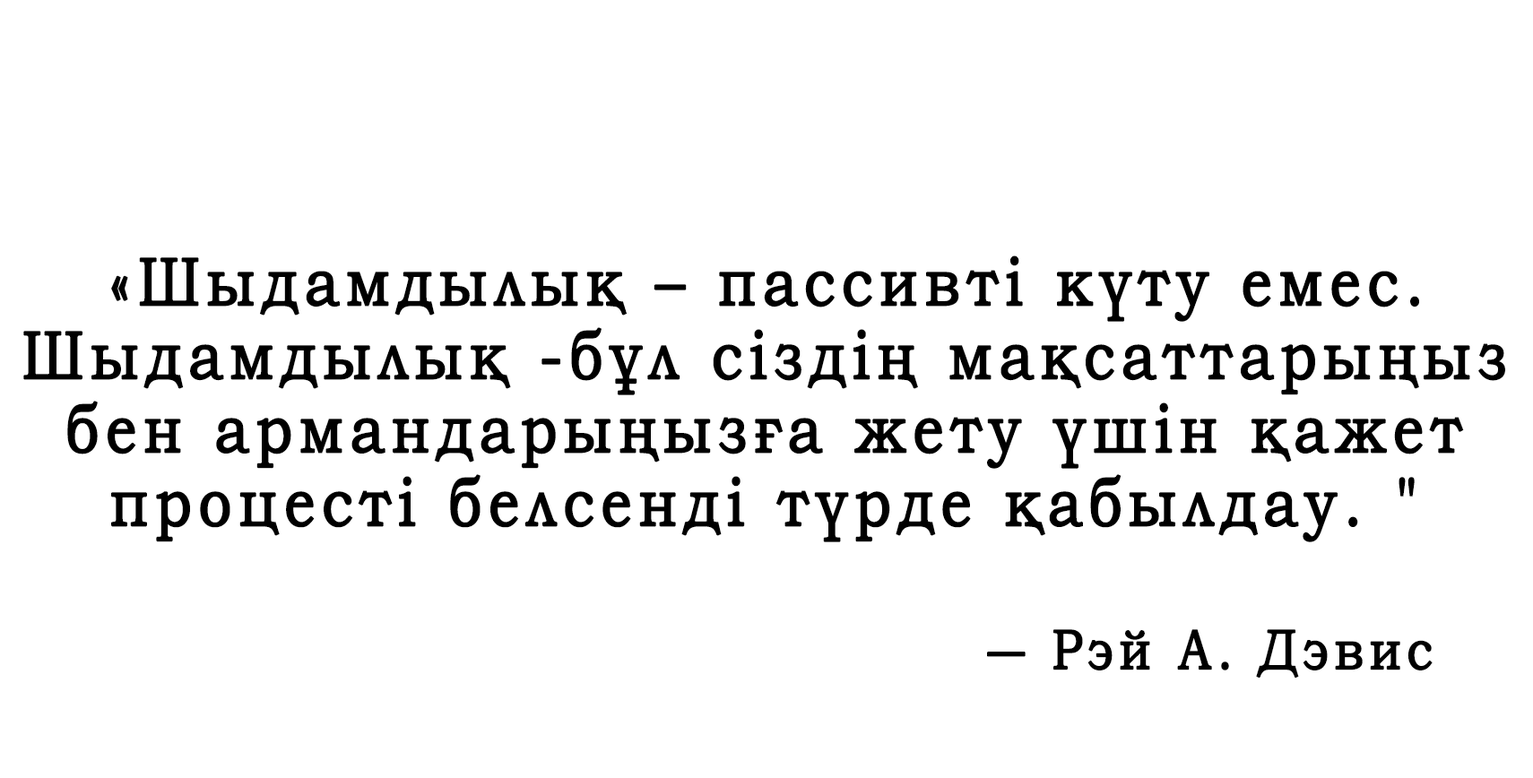
<style>
.page{position:relative;width:1533px;height:778px;background:#ffffff}
.page>*{position:absolute;margin:0}
.t1{font:68.6px/73.5px "BookmanOldStyleKZ";letter-spacing:0.1em;color:#000000;font-weight:bold;scale:0.85 1}
.t2{font:57px "BookmanOldStyleKZ";letter-spacing:0.1em;color:#000000;font-weight:bold;scale:0.85 1}
</style>
<div class="page">
<p class="t1" style="left:23px;top:255px;width:1482px;height:287px;text-align:center">«Шыдамдылық – пассивті күту емес. <br>Шыдамдылық -бұл сіздің мақсаттарыңыз<br>бен армандарыңызға жету үшін қажет<br>процесті белсенді түрде қабылдау. "</p>
<p class="t2" style="left:987px;top:629px;width:445px;height:50px">― Рэй А. Дэвис</p>
</div>
